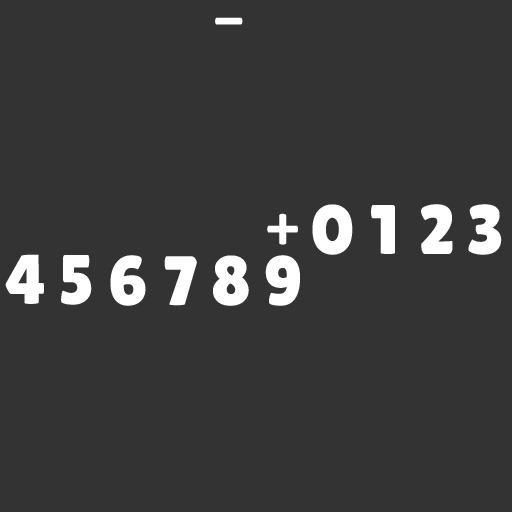
<style>
.page{position:relative;width:512px;height:512px;background:#333333}
.page>*{position:absolute;margin:0}
.t1{font:60px "LilitaOne";color:#ffffff}
.t2{font:70px "LilitaOne";color:#ffffff}
</style>
<div class="page">
<p class="t1" style="left:215px;top:17px;width:28px;height:8px">-</p>
<p class="t2" style="left:312px;top:204px;width:41px;height:51px">0</p>
<p class="t2" style="left:371px;top:205px;width:24px;height:49px">1</p>
<p class="t2" style="left:421px;top:204px;width:32px;height:50px">2</p>
<p class="t2" style="left:468px;top:204px;width:34px;height:51px">3</p>
<p class="t1" style="left:267px;top:213px;width:31px;height:32px">+</p>
<p class="t2" style="left:5px;top:254px;width:39px;height:50px">4</p>
<p class="t2" style="left:61px;top:255px;width:31px;height:50px">5</p>
<p class="t2" style="left:110px;top:255px;width:36px;height:51px">6</p>
<p class="t2" style="left:164px;top:256px;width:33px;height:50px">7</p>
<p class="t2" style="left:213px;top:255px;width:36px;height:51px">8</p>
<p class="t2" style="left:265px;top:255px;width:35px;height:51px">9</p>
</div>
